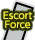
<style>
.page{position:relative;width:35px;height:40px}
.page>*{position:absolute;margin:0}
.t1{font:9px/9px "UDShinGoPro-Light";color:#f9f901;font-weight:bold}
</style>
<div class="page">
<p class="t1" style="left:3px;top:11px;width:30px;height:18px;text-align:center">Escort<br>Force</p>
</div>
